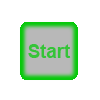
<style>
.page{position:relative;width:100px;height:100px;background:#ffffff}
.page>*{position:absolute;margin:0}
.t1{font:18.7px "Arial-BoldMT";color:#35c438}
</style>
<div class="page">
<p class="t1" style="left:28px;top:44px;width:43px;height:14px">Start</p>
</div>
